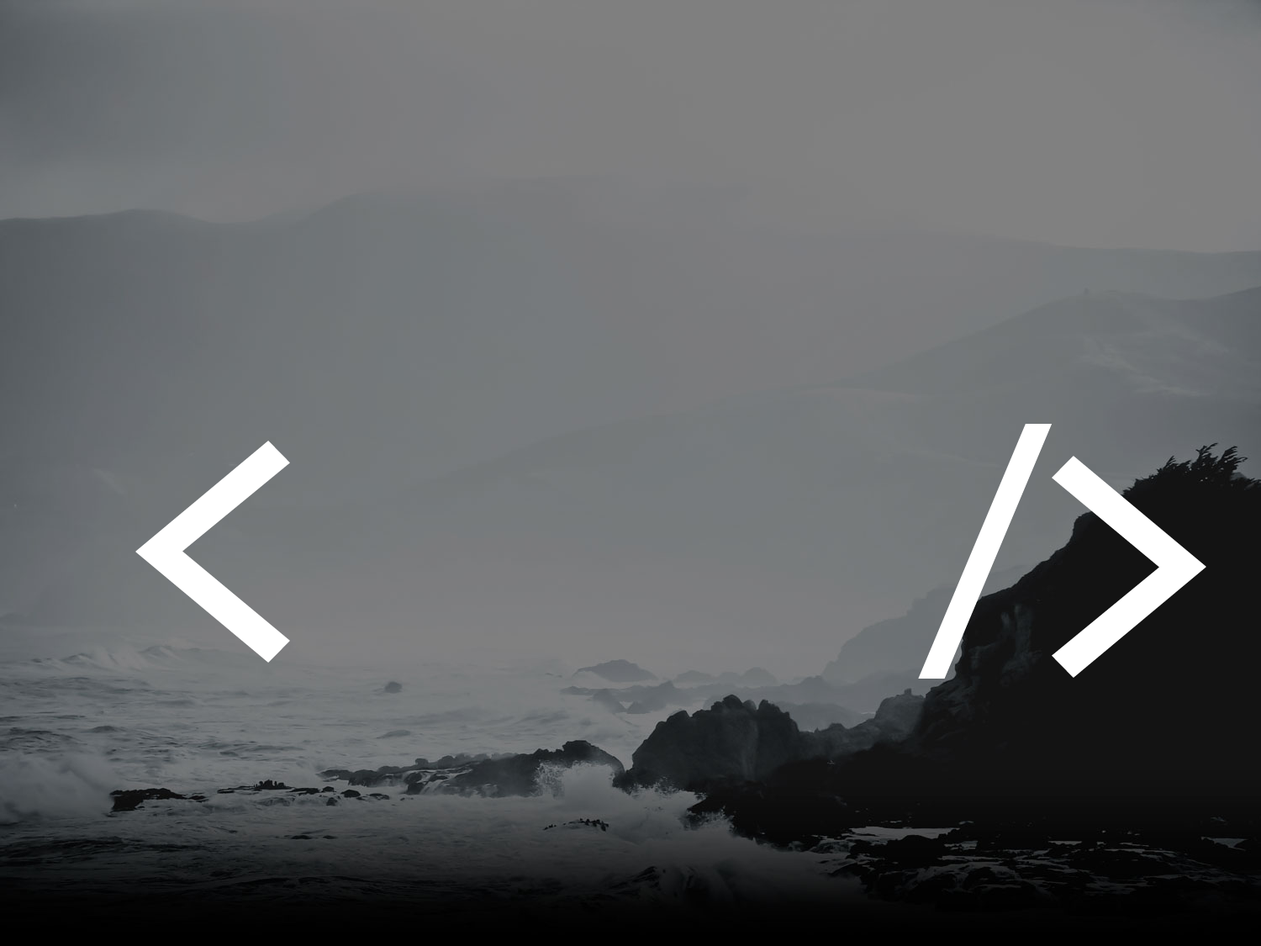
<style>
.page{position:relative;width:1261px;height:946px}
.page>*{position:absolute;margin:0}
.t1{font:320.3px "CodeNewRoman";color:#ffffff}
.t2{font:404.3px "CodeNewRoman";color:#ffffff}
</style>
<div class="page">
<p class="t1" style="left:918px;top:424px;width:134px;height:254px">/</p>
<p class="t2" style="left:135px;top:440px;width:155px;height:222px">&lt;</p>
<p class="t2" style="left:1052px;top:456px;width:154px;height:222px;rotate:180deg">&lt;</p>
</div>
